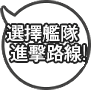
<style>
.page{position:relative;width:91px;height:90px;background:#ffffff}
.page>*{position:absolute;margin:0}
.t1{font:18px/20px "GothicMB101Pr6N-Medium";color:#ffffff}
.t2{font:18px/20px "GothicMB101Pr6N-Light";color:#ffffff}
</style>
<div class="page">
<p class="t1" style="left:6px;top:24px;width:79px;height:38px;text-align:center">選擇艦隊<br>  進擊路線<span class="t2">!</span></p>
</div>
